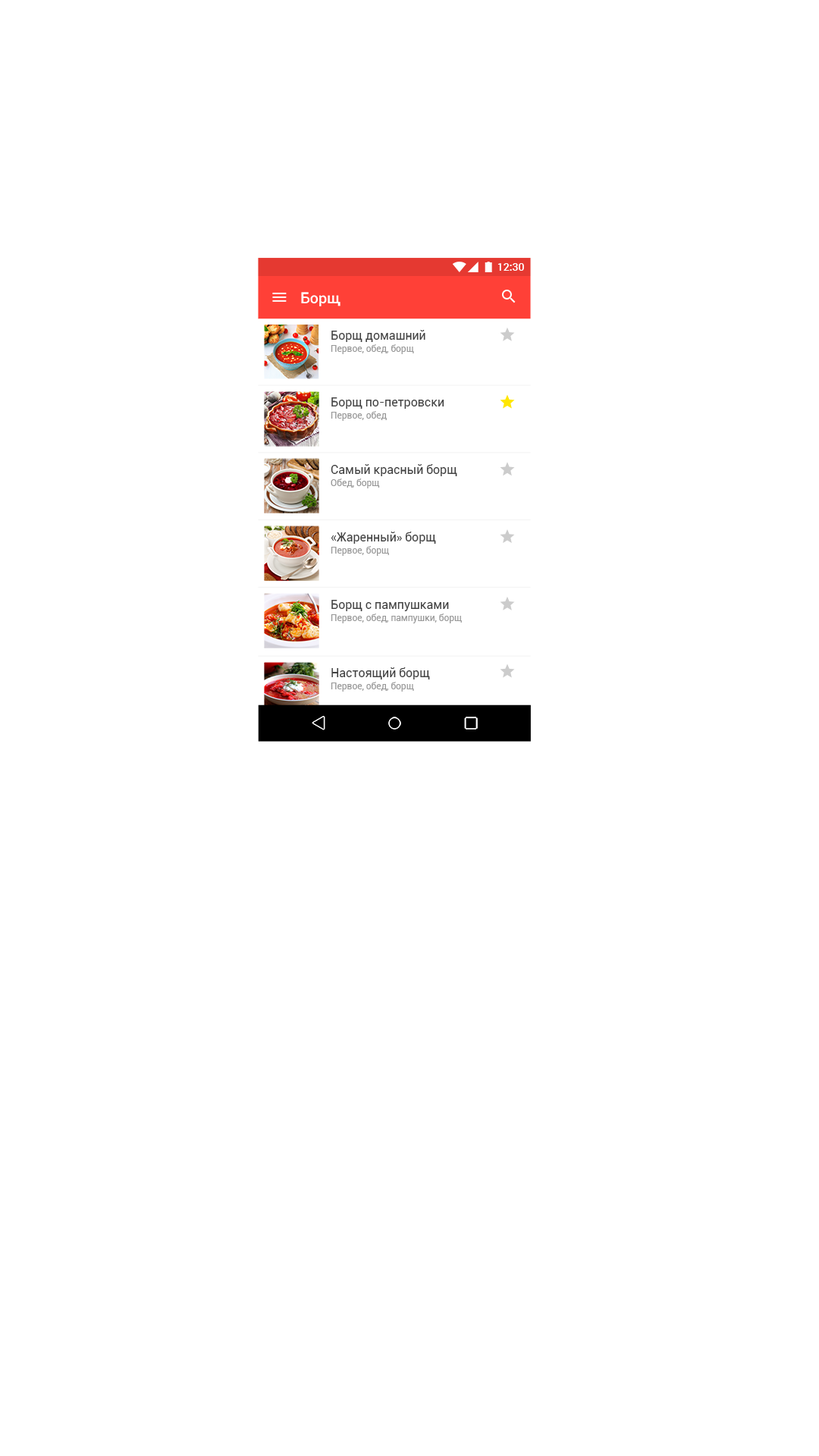
<style>
.page{position:relative;width:819px;height:1456px;background:#ffffff}
.page>*{position:absolute;margin:0}
.t1{font:10.6px "Roboto-Medium";color:#ffffff}
.t2{font:15.1px "Roboto-Medium";color:#ffffff}
.t3{font:12.1px "Roboto-Regular";color:#424242}
.t4{font:9.1px "Roboto-Regular";color:#999999}
</style>
<div class="page">
<p class="t1" style="left:497px;top:263px;width:27px;height:8px">12:30</p>
<p class="t2" style="left:301px;top:292px;width:39px;height:14px">Борщ</p>
<p class="t3" style="left:331px;top:330px;width:94px;height:12px">Борщ домашний</p>
<p class="t4" style="left:331px;top:344px;width:83px;height:10px">Первое, обед, борщ</p>
<p class="t3" style="left:331px;top:397px;width:113px;height:12px">Борщ по-петровски</p>
<p class="t4" style="left:331px;top:411px;width:56px;height:10px">Первое, обед</p>
<p class="t3" style="left:331px;top:464px;width:126px;height:12px">Самый красный борщ</p>
<p class="t4" style="left:331px;top:479px;width:49px;height:9px">Обед, борщ</p>
<p class="t3" style="left:331px;top:532px;width:105px;height:12px">«Жаренный» борщ</p>
<p class="t4" style="left:331px;top:546px;width:58px;height:10px">Первое, борщ</p>
<p class="t3" style="left:331px;top:600px;width:118px;height:11px">Борщ с пампушками</p>
<p class="t4" style="left:331px;top:613px;width:131px;height:10px">Первое, обед, пампушки, борщ</p>
<p class="t3" style="left:331px;top:667px;width:99px;height:12px">Настоящий борщ</p>
<p class="t4" style="left:331px;top:682px;width:83px;height:10px">Первое, обед, борщ</p>
</div>
